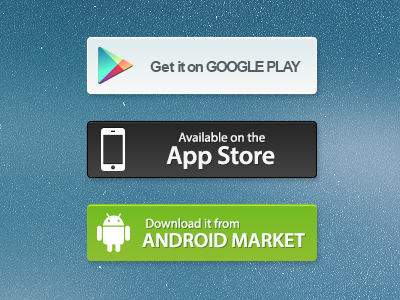
<style>
.page{position:relative;width:400px;height:300px}
.page>*{position:absolute;margin:0}
.t1{font:14.6px "Arial-BoldMT";letter-spacing:-0.075em;color:#565f64;text-transform:uppercase}
.t2{font:14.6px "Arial-BoldMT";color:#565f64}
.t3{font:14.6px "Arial-BoldMT";letter-spacing:-0.075em;color:#565f64}
.t4{font:12.9px "MyriadPro-Regular";color:#ffffff}
.t5{font:25.9px "MyriadPro-Semibold";letter-spacing:-0.01em;color:#ffffff}
.t6{font:20.2px "MyriadPro-Semibold";letter-spacing:-0.01em;color:#ffffff;text-transform:uppercase}
</style>
<div class="page">
<p class="t1" style="left:150px;top:61px;width:151px;height:11px"><span class="t2">Get</span><span class="t3"> it on</span> google play</p>
<p class="t4" style="left:178px;top:132px;width:87px;height:10px;opacity:0.94">Available on the</p>
<p class="t5" style="left:166px;top:146px;width:109px;height:23px;opacity:0.94">App Store</p>
<p class="t4" style="left:146px;top:218px;width:93px;height:10px;opacity:0.94">Download it from</p>
<p class="t6" style="left:142px;top:233px;width:163px;height:15px;opacity:0.94">Android market</p>
</div>
